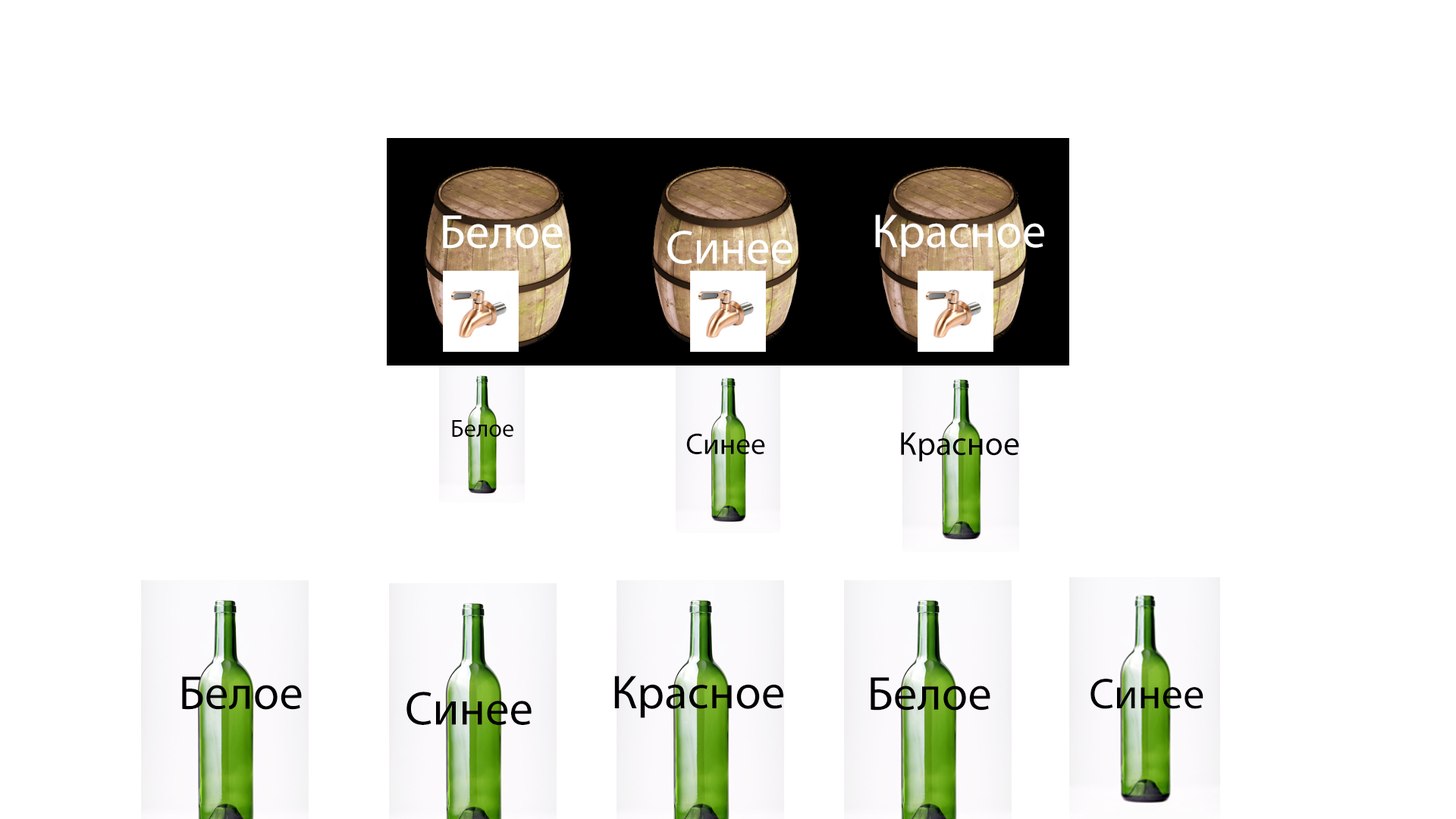
<style>
.page{position:relative;width:1456px;height:819px;background:#ffffff}
.page>*{position:absolute;margin:0}
.t1{font:47.8px "MyriadPro-Regular";color:#ffffff}
.t2{font:24.5px "MyriadPro-Regular";color:#000000}
.t3{font:29.9px "MyriadPro-Regular";color:#000000}
.t4{font:33.3px "MyriadPro-Regular";color:#000000}
.t5{font:47.8px "MyriadPro-Regular";color:#000000}
.t6{font:43.2px "MyriadPro-Regular";color:#000000}
</style>
<div class="page">
<p class="t1" style="left:443px;top:215px;width:120px;height:34px">Белое</p>
<p class="t1" style="left:875px;top:215px;width:169px;height:42px">Красное</p>
<p class="t1" style="left:667px;top:231px;width:125px;height:33px">Синее</p>
<p class="t2" style="left:452px;top:420px;width:61px;height:17px">Белое</p>
<p class="t3" style="left:686px;top:433px;width:79px;height:21px">Синее</p>
<p class="t4" style="left:901px;top:432px;width:118px;height:30px">Красное</p>
<p class="t5" style="left:182px;top:676px;width:120px;height:34px">Белое</p>
<p class="t5" style="left:614px;top:676px;width:169px;height:42px">Красное</p>
<p class="t5" style="left:871px;top:677px;width:119px;height:34px">Белое</p>
<p class="t6" style="left:1090px;top:679px;width:113px;height:30px">Синее</p>
<p class="t5" style="left:406px;top:692px;width:126px;height:33px">Синее</p>
</div>
